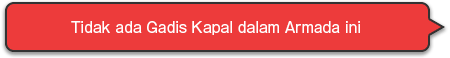
<style>
.page{position:relative;width:450px;height:58px;background:#ed3b3b}
.page>*{position:absolute;margin:0}
.t1{font:14px "GothicMB101Pro-Regular";color:#ffffff}
</style>
<div class="page">
<p class="t1" style="left:71px;top:21px;width:289px;height:14px">Tidak ada Gadis Kapal dalam Armada ini</p>
</div>
